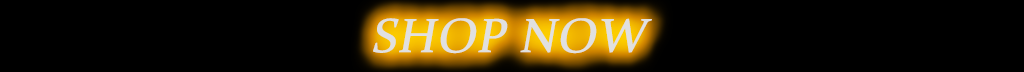
<style>
.page{position:relative;width:1024px;height:72px;background:#000000}
.page>*{position:absolute;margin:0}
.t1{font:48px "Constantia";color:#e0e0e0;font-weight:bold;font-style:italic}
</style>
<div class="page">
<p class="t1" style="left:373px;top:18px;width:279px;height:36px">SHOP NOW</p>
</div>
